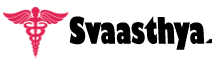
<style>
.page{position:relative;width:212px;height:60px;background:#ffffff}
.page>*{position:absolute;margin:0}
.t1{font:35.9px "GillSans-UltraBoldCondensed";color:#000000;scale:0.9 1}
</style>
<div class="page">
<p class="t1" style="left:69px;top:16px;width:136px;height:34px">Svaasthya</p>
</div>
